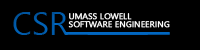
<style>
.page{position:relative;width:200px;height:50px;background:#000000}
.page>*{position:absolute;margin:0}
.t1{font:32px "SegoeUI";color:#0059a7}
.t2{font:8px/8px "SegoeUI";color:#ffffff;font-weight:bold;scale:1.05 1}
</style>
<div class="page">
<p class="t1" style="left:13px;top:12px;width:55px;height:23px">CSR</p>
<p class="t2" style="left:68px;top:13px;width:102px;height:15px">UMASS LOWELL <br>SOFTWARE ENGINEERING</p>
</div>
